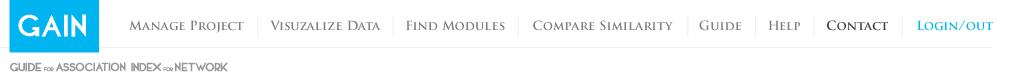
<style>
.page{position:relative;width:1016px;height:80px;background:#ffffff}
.page>*{position:absolute;margin:0}
.t1{font:12.3px "TrajanPro-Bold";color:#7c7c7c}
.t2{font:12.3px "TrajanPro-Bold";color:#3b3c3c}
.t3{font:12.3px "TrajanPro-Bold";color:#00b5f1}
</style>
<div class="page">
<p class="t1" style="left:129px;top:20px;width:115px;height:13px">Manage Project</p>
<p class="t1" style="left:270px;top:20px;width:111px;height:11px">Visuzalize Data</p>
<p class="t1" style="left:406px;top:20px;width:99px;height:11px">Find Modules</p>
<p class="t1" style="left:533px;top:20px;width:140px;height:11px">Compare Similarity</p>
<p class="t1" style="left:699px;top:20px;width:42px;height:11px">Guide</p>
<p class="t1" style="left:768px;top:20px;width:33px;height:10px">Help</p>
<p class="t2" style="left:827px;top:20px;width:61px;height:11px">Contact <span class="t1">Us</span></p>
<p class="t3" style="left:917px;top:20px;width:76px;height:11px">Login/out</p>
</div>
